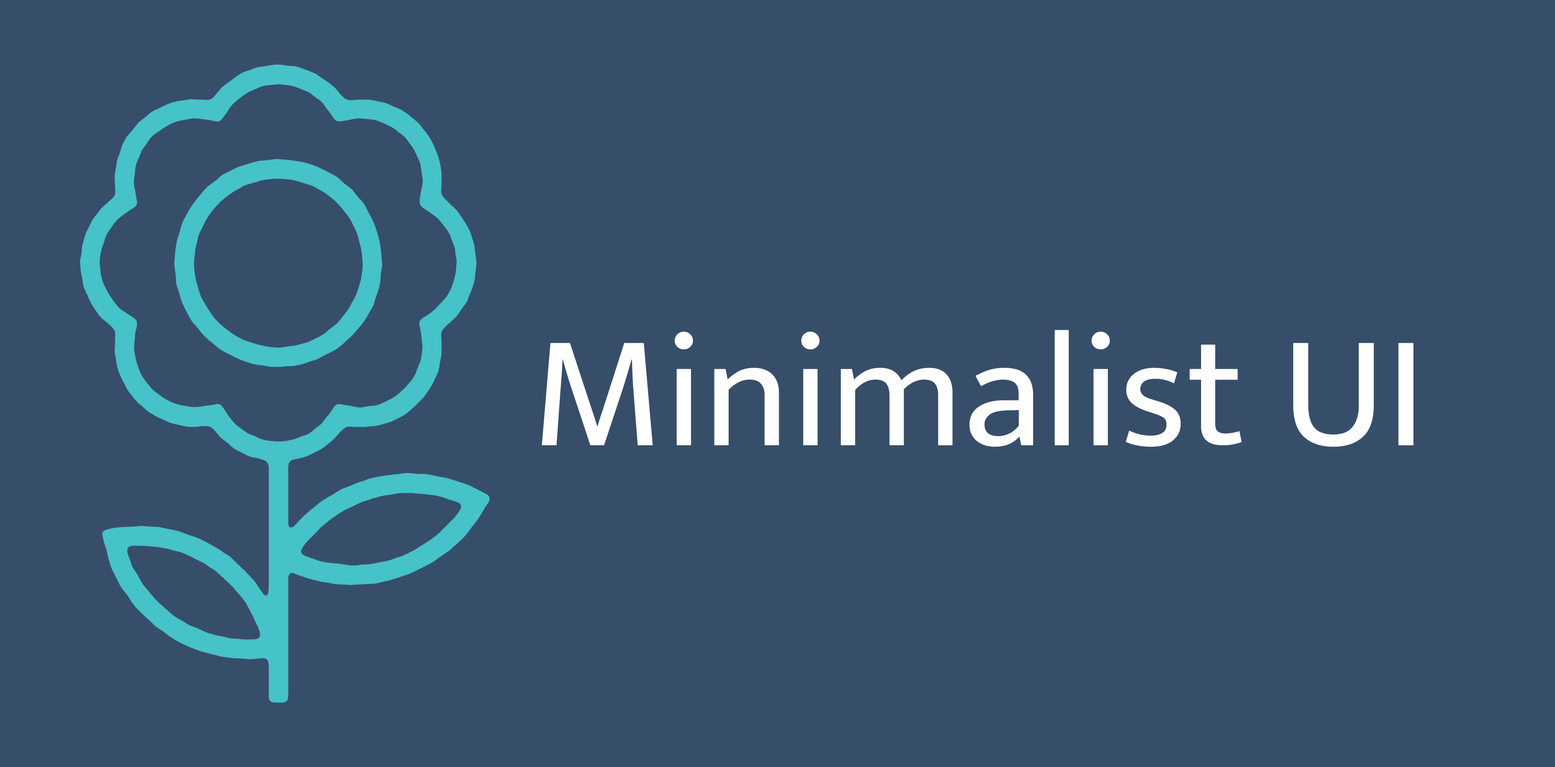
<style>
.page{position:relative;width:1555px;height:767px;background:#374e6b}
.page>*{position:absolute;margin:0}
.t1{font:162.3px "MuktaMahee-Regular";color:#ffffff}
</style>
<div class="page">
<p class="t1" style="left:542px;top:330px;width:871px;height:117px">Minimalist UI</p>
</div>
